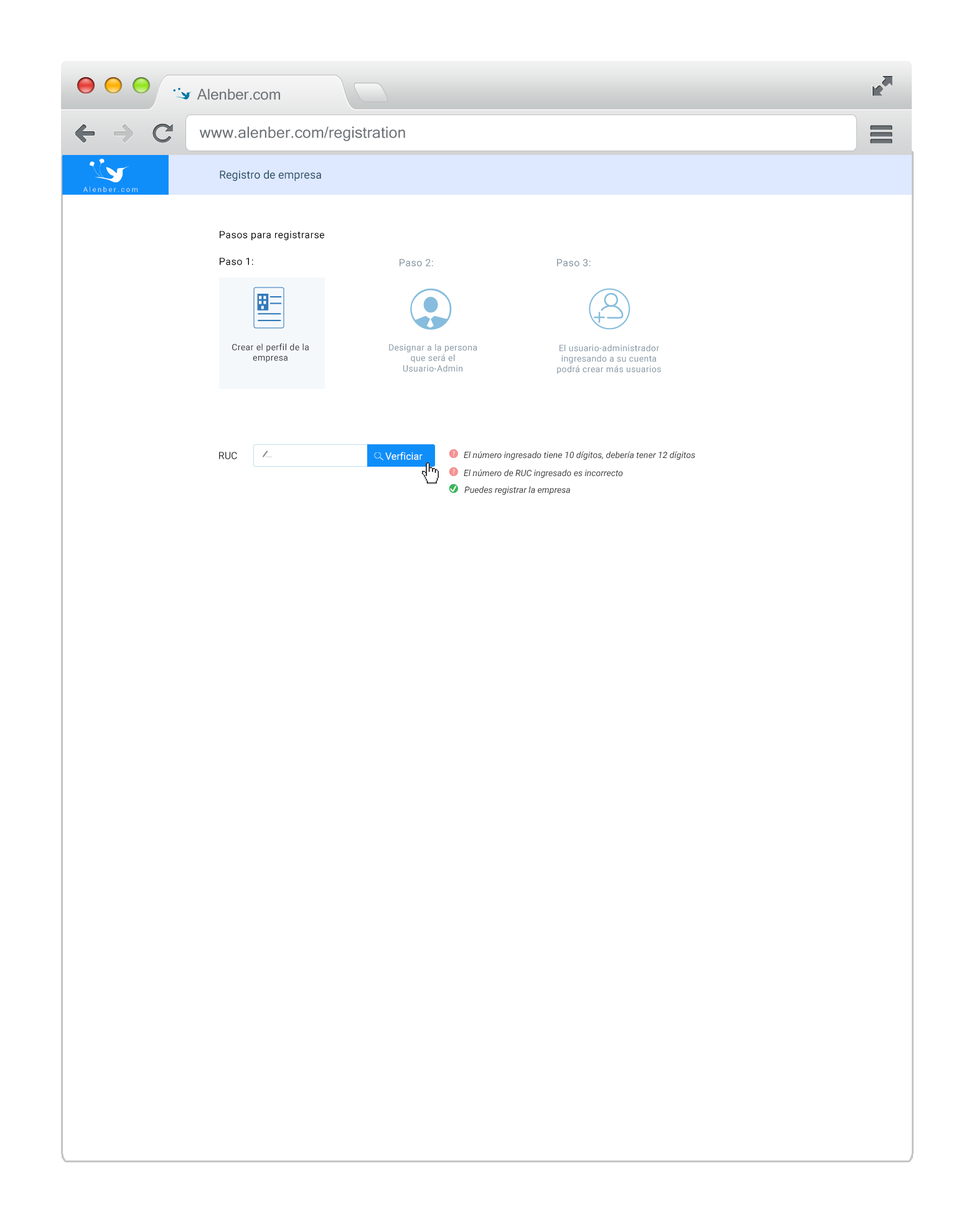
<style>
.page{position:relative;width:974px;height:1224px;background:#ffffff}
.page>*{position:absolute;margin:0}
.t1{font:14.9px "MicrosoftSansSerif";color:#6b7175}
.t2{font:15.7px "MicrosoftSansSerif";color:#6b7175}
.t3{font:11.2px "Roboto-Regular";color:#32566d}
.t4{font:6.8px "Roboto-Light"}
.t5{font:10px "Roboto-Regular";letter-spacing:0.03em;color:#000000}
.t6{font:10px "Roboto-Regular";letter-spacing:0.03em;color:#8496a3}
.t7{font:8.7px "Roboto-Regular";letter-spacing:0.03em;color:#333333}
.t8{font:8.7px "Roboto-Regular";letter-spacing:0.03em;color:#8496a3}
.t9{font:10px "Roboto-Regular";color:#333333}
.t10{font:10px "Roboto-Regular";color:#ffffff}
.t11{font:8.7px "Roboto-Italic";color:#333333}
</style>
<div class="page">
<p class="t1" style="left:197px;top:88px;width:83px;height:12px">Alenber.com</p>
<p class="t2" style="left:199px;top:126px;width:206px;height:15px">www.alenber.com/registration</p>
<p class="t3" style="left:220px;top:170px;width:101px;height:11px">Registro de empresa</p>
<p class="t4" style="left:83px;top:186px;width:55px;height:6px">A l e n b e r . c o m</p>
<p class="t5" style="left:220px;top:231px;width:104px;height:9px">Pasos para registrarse</p>
<p class="t5" style="left:220px;top:258px;width:33px;height:7px">Paso 1:</p>
<p class="t6" style="left:400px;top:259px;width:33px;height:7px">Paso 2:</p>
<p class="t6" style="left:557px;top:259px;width:34px;height:7px">Paso 3:</p>
<p class="t7" style="left:232px;top:344px;width:77px;height:19px;text-align:center">Crear el perfil de la empresa</p>
<p class="t8" style="left:389px;top:344px;width:88px;height:28px;text-align:center">Designar a la persona que será el <br>Usuario-Admin</p>
<p class="t8" style="left:557px;top:344px;width:104px;height:30px;text-align:center">El usuario-administrador ingresando a su cuenta podrá crear más usuarios</p>
<p class="t9" style="left:219px;top:452px;width:18px;height:7px">RUC</p>
<p class="t10" style="left:385px;top:452px;width:38px;height:8px">Verficiar</p>
<p class="t11" style="left:464px;top:451px;width:231px;height:9px">El número ingresado tiene 10 dígitos, debería tener 12 dígitos</p>
<p class="t11" style="left:464px;top:469px;width:159px;height:9px">El número de RUC ingresado es incorrecto</p>
<p class="t11" style="left:464px;top:486px;width:106px;height:9px">Puedes registrar la empresa</p>
</div>
